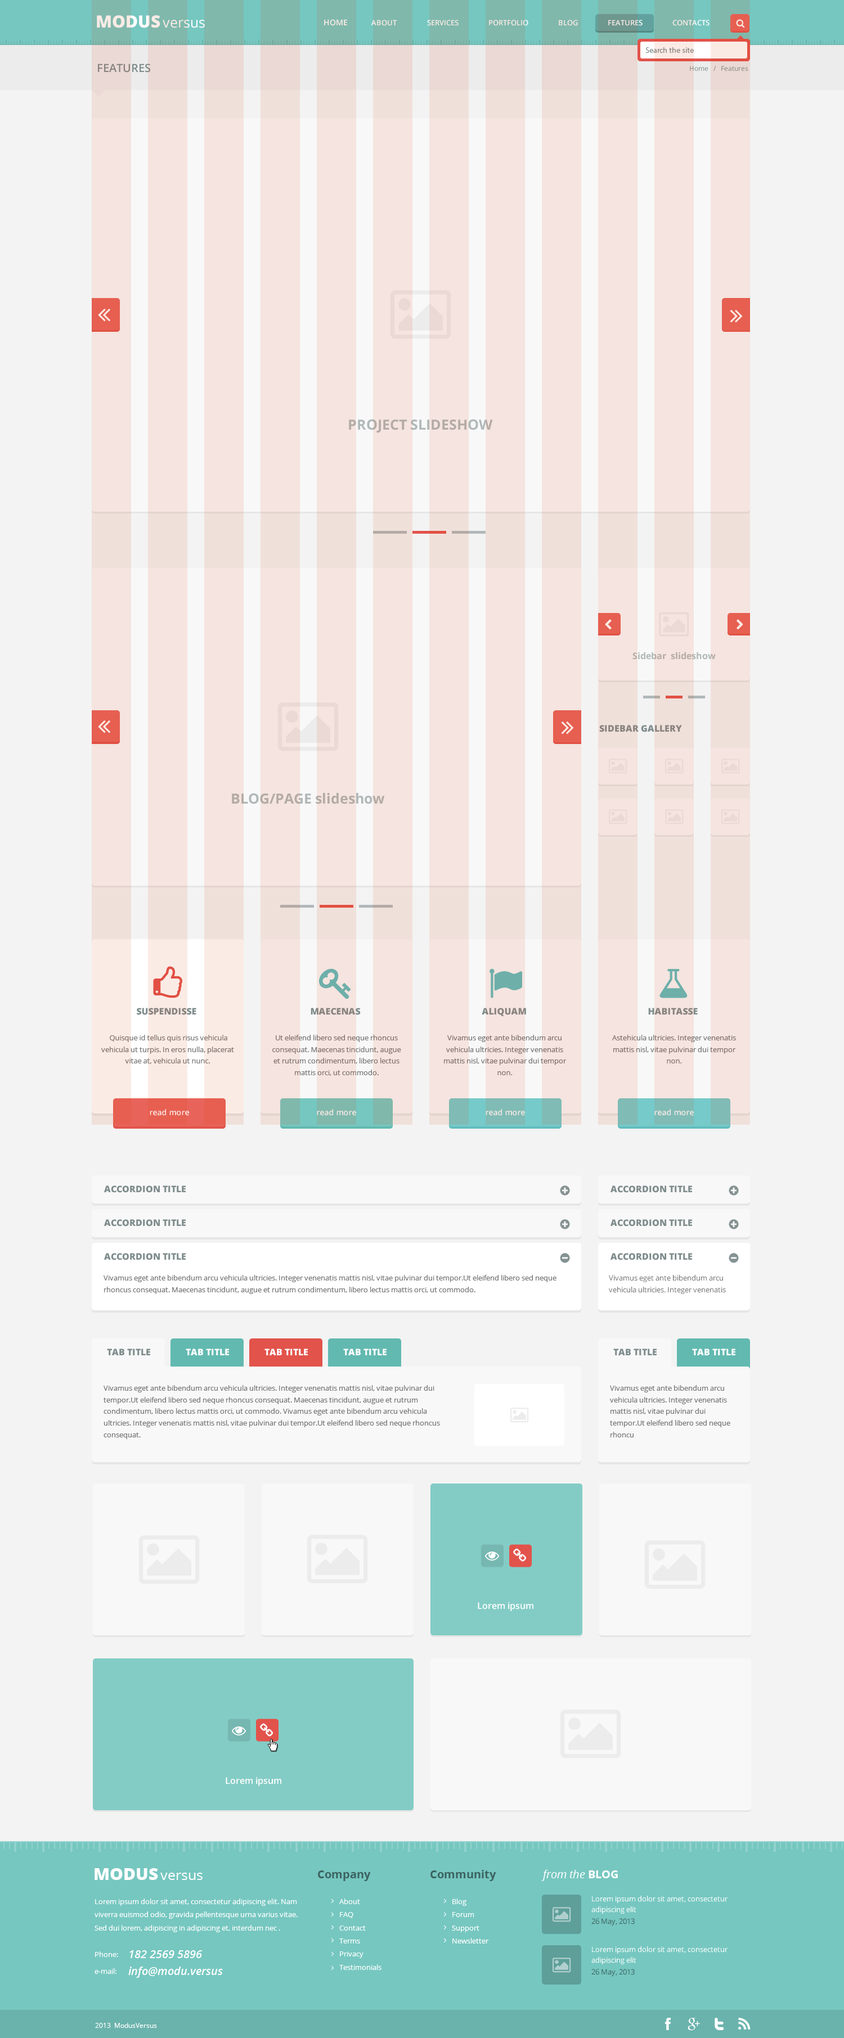
<style>
.page{position:relative;width:844px;height:2038px;background:#f3f3f3}
.page>*{position:absolute;margin:0}
.t1{font:16.9px "OpenSans-Extrabold";color:#fbebe5}
.t2{font:14.1px "OpenSans"}
.t3{font:7.9px "OpenSans-Semibold";color:#fbebe5}
.t4{font:7.3px "OpenSans-Semibold";color:#fbebe5}
.t5{font:7.3px "OpenSans-Semibold"}
.t6{font:7.9px "MyriadPro-Regular";color:#7f8c8c}
.t7{font:11.2px "OpenSans-Semibold";color:#7f8c8c}
.t8{font:6.8px "OpenSans";color:#7f8c8c}
.t9{font:14.1px "OpenSans-Bold";color:#b0b8b9}
.t10{font:9px "OpenSans-Bold";color:#b0b8b8}
.t11{font:9px "OpenSans-Extrabold";color:#7f8c8c}
.t12{font:14.1px "OpenSans-Bold";color:#b0b8b8}
.t13{font:7.3px/11.7px "OpenSans";color:#777777}
.t14{font:9px "OpenSans-Extrabold";color:#ffffff}
.t15{font:9px "OpenSans-Semibold";color:#ffffff}
.t16{font:16.9px "OpenSans-Extrabold";color:#ffffff}
.t17{font:14.1px "OpenSans";color:#ffffff}
.t18{font:11.2px "OpenSans-Bold";color:#3b6360}
.t19{font:11.2px "OpenSans-Italic";color:#ffffff}
.t20{font:11.2px "OpenSans-Bold";color:#ffffff}
.t21{font:7.3px/13.2px "OpenSans";color:#ffffff}
.t22{font:7.3px/11px "OpenSans";color:#ffffff}
.t23{font:7.3px "OpenSans";color:#3b6360}
.t24{font:7.3px "OpenSans";color:#ffffff}
.t25{font:11.2px "OpenSans-SemiboldItalic";color:#ffffff}
.t26{font:6.8px "OpenSans";color:#ffffff}
</style>
<div class="page">
<p class="t1" style="left:97px;top:15px;width:63px;height:13px">MODUS</p>
<p class="t2" style="left:163px;top:20px;width:42px;height:8px">versus</p>
<p class="t3" style="left:324px;top:19px;width:23px;height:7px">HOME</p>
<p class="t4" style="left:371px;top:20px;width:26px;height:6px">ABOUT</p>
<p class="t4" style="left:427px;top:20px;width:31px;height:6px">SERVICES</p>
<p class="t4" style="left:489px;top:20px;width:39px;height:6px">PORTFOLIO</p>
<p class="t4" style="left:559px;top:20px;width:19px;height:6px">BLOG</p>
<p class="t4" style="left:608px;top:20px;width:34px;height:6px">FEATURES</p>
<p class="t5" style="left:672px;top:20px;width:37px;height:6px">CONTACTS</p>
<p class="t6" style="left:645px;top:47px;width:49px;height:6px">Search the site</p>
<p class="t7" style="left:98px;top:64px;width:52px;height:9px">FEATURES</p>
<p class="t8" style="left:690px;top:66px;width:58px;height:5px">Home   /   Features</p>
<p class="t9" style="left:349px;top:419px;width:144px;height:14px">PROJECT SLIDESHOW</p>
<p class="t10" style="left:632px;top:652px;width:84px;height:8px">Sidebar  slideshow</p>
<p class="t11" style="left:599px;top:725px;width:83px;height:7px">SIDEBAR GALLERY</p>
<p class="t12" style="left:232px;top:793px;width:153px;height:11px">BLOG/PAGE slideshow</p>
<p class="t11" style="left:137px;top:1008px;width:59px;height:7px">SUSPENDISSE</p>
<p class="t11" style="left:310px;top:1008px;width:51px;height:7px">MAECENAS</p>
<p class="t11" style="left:482px;top:1008px;width:44px;height:8px">ALIQUAM</p>
<p class="t11" style="left:648px;top:1008px;width:50px;height:7px">HABITASSE</p>
<p class="t13" style="left:101px;top:1035px;width:133px;height:29px;text-align:center">Quisque id tellus quis risus vehicula vehicula ut turpis. In eros nulla, placerat vitae at, vehicula ut nunc.</p>
<p class="t13" style="left:272px;top:1035px;width:129px;height:41px;text-align:center">Ut eleifend libero sed neque rhoncus consequat. Maecenas tincidunt, augue et rutrum condimentum, libero lectus mattis orci, ut commodo.</p>
<p class="t13" style="left:444px;top:1035px;width:122px;height:41px;text-align:center">Vivamus eget ante bibendum arcu vehicula ultricies. Integer venenatis mattis nisl, vitae pulvinar dui tempor non.</p>
<p class="t13" style="left:612px;top:1035px;width:124px;height:29px;text-align:center">Astehicula ultricies. Integer venenatis mattis nisl, vitae pulvinar dui tempor non.</p>
<p class="t3" style="left:150px;top:1109px;width:39px;height:7px">read more</p>
<p class="t3" style="left:317px;top:1109px;width:39px;height:7px">read more</p>
<p class="t3" style="left:485px;top:1109px;width:40px;height:7px">read more</p>
<p class="t3" style="left:654px;top:1109px;width:40px;height:7px">read more</p>
<p class="t11" style="left:104px;top:1186px;width:82px;height:7px">ACCORDION TITLE</p>
<p class="t11" style="left:610px;top:1186px;width:82px;height:7px">ACCORDION TITLE</p>
<p class="t11" style="left:104px;top:1220px;width:82px;height:7px">ACCORDION TITLE</p>
<p class="t11" style="left:610px;top:1220px;width:82px;height:7px">ACCORDION TITLE</p>
<p class="t11" style="left:104px;top:1253px;width:82px;height:8px">ACCORDION TITLE</p>
<p class="t11" style="left:610px;top:1253px;width:82px;height:8px">ACCORDION TITLE</p>
<p class="t13" style="left:104px;top:1275px;width:452px;height:19px">Vivamus eget ante bibendum arcu vehicula ultricies. Integer venenatis mattis nisl, vitae pulvinar dui tempor.Ut eleifend libero sed neque rhoncus consequat. Maecenas tincidunt, augue et rutrum condimentum, libero lectus mattis orci, ut commodo.</p>
<p class="t13" style="left:609px;top:1275px;width:117px;height:19px">Vivamus eget ante bibendum arcu vehicula ultricies. Integer venenatis</p>
<p class="t11" style="left:107px;top:1349px;width:43px;height:7px">TAB TITLE</p>
<p class="t14" style="left:186px;top:1349px;width:43px;height:7px">TAB TITLE</p>
<p class="t14" style="left:264px;top:1349px;width:44px;height:7px">TAB TITLE</p>
<p class="t14" style="left:343px;top:1349px;width:43px;height:7px">TAB TITLE</p>
<p class="t11" style="left:613px;top:1349px;width:43px;height:7px">TAB TITLE</p>
<p class="t14" style="left:692px;top:1349px;width:43px;height:7px">TAB TITLE</p>
<p class="t13" style="left:104px;top:1385px;width:336px;height:54px">Vivamus eget ante bibendum arcu vehicula ultricies. Integer venenatis mattis nisl, vitae pulvinar dui tempor.Ut eleifend libero sed neque rhoncus consequat. Maecenas tincidunt, augue et rutrum condimentum, libero lectus mattis orci, ut commodo. Vivamus eget ante bibendum arcu vehicula ultricies. Integer venenatis mattis nisl, vitae pulvinar dui tempor.Ut eleifend libero sed neque rhoncus consequat.</p>
<p class="t13" style="left:610px;top:1385px;width:120px;height:53px">Vivamus eget ante bibendum arcu vehicula ultricies. Integer venenatis mattis nisl, vitae pulvinar dui tempor.Ut eleifend libero sed neque rhoncu</p>
<p class="t15" style="left:478px;top:1603px;width:55px;height:9px">Lorem ipsum</p>
<p class="t15" style="left:226px;top:1778px;width:55px;height:8px">Lorem ipsum</p>
<p class="t16" style="left:94px;top:1869px;width:64px;height:11px">MODUS</p>
<p class="t17" style="left:160px;top:1873px;width:42px;height:7px">versus</p>
<p class="t18" style="left:318px;top:1871px;width:53px;height:11px">Company</p>
<p class="t18" style="left:430px;top:1870px;width:66px;height:12px">Community</p>
<p class="t19" style="left:541px;top:1870px;width:77px;height:12px">from the <span class="t20">BLOG</span></p>
<p class="t21" style="left:94px;top:1899px;width:204px;height:34px">Lorem ipsum dolor sit amet, consectetur adipiscing elit. Nam viverra euismod odio, gravida pellentesque urna varius vitae. Sed dui lorem, adipiscing in adipiscing et, interdum nec .</p>
<p class="t21" style="left:339px;top:1899px;width:42px;height:71px">About<br>FAQ<br>Contact<br>Terms<br>Privacy<br>Testimonials</p>
<p class="t21" style="left:452px;top:1899px;width:37px;height:45px">Blog<br>Forum<br>Support<br>Newsletter</p>
<p class="t22" style="left:591px;top:1896px;width:136px;height:18px">Lorem ipsum dolor sit amet, consectetur adipiscing elit</p>
<p class="t23" style="left:591px;top:1919px;width:43px;height:7px">26 May, 2013</p>
<p class="t22" style="left:591px;top:1947px;width:136px;height:18px">Lorem ipsum dolor sit amet, consectetur adipiscing elit</p>
<p class="t24" style="left:95px;top:1952px;width:23px;height:6px">Phone:</p>
<p class="t25" style="left:129px;top:1951px;width:73px;height:8px">182 2569 5896</p>
<p class="t24" style="left:94px;top:1969px;width:22px;height:5px">e-mail:</p>
<p class="t25" style="left:128px;top:1967px;width:95px;height:11px">info@modu.versus</p>
<p class="t23" style="left:591px;top:1969px;width:43px;height:8px">26 May, 2013</p>
<p class="t26" style="left:95px;top:2023px;width:62px;height:5px">2013  ModusVersus</p>
</div>
